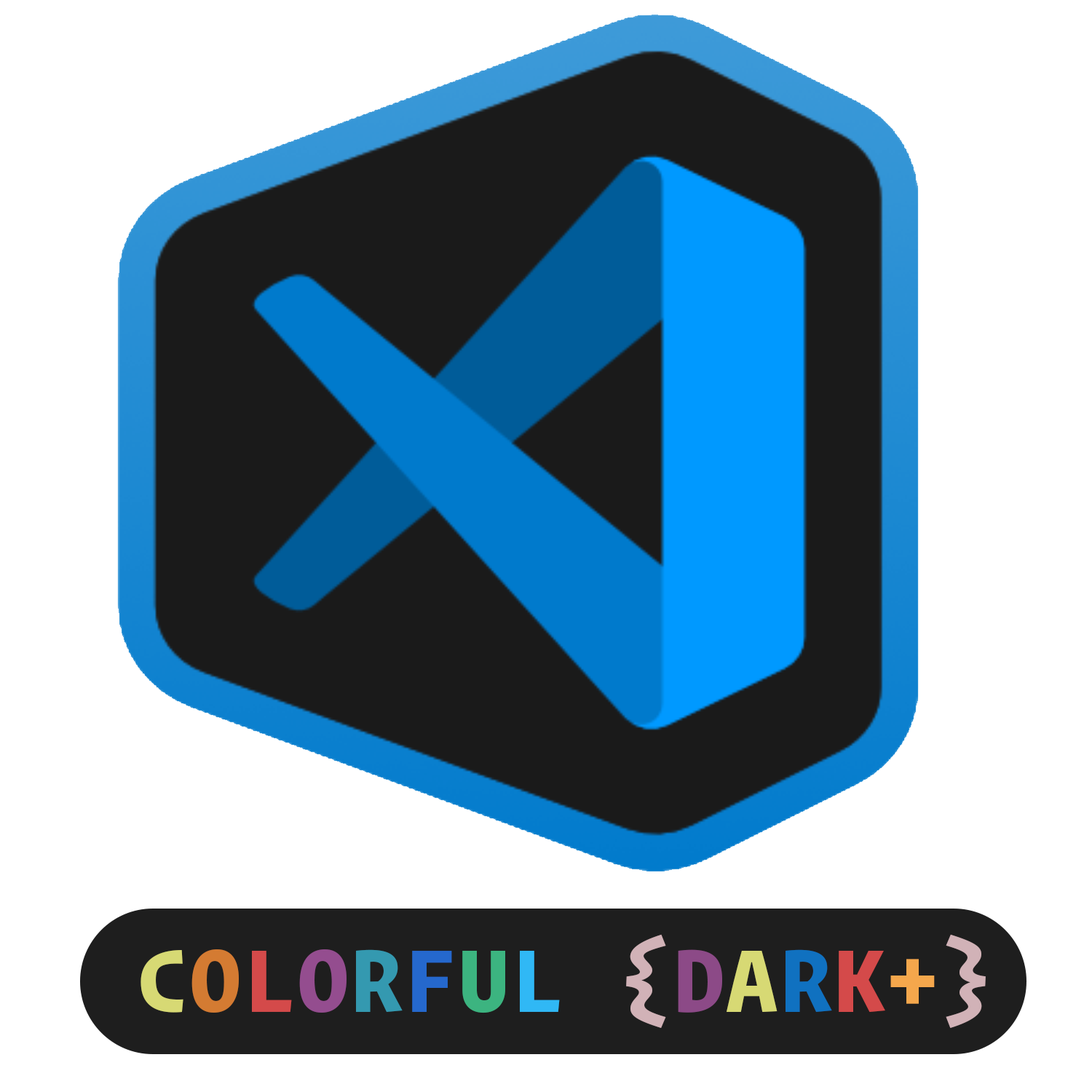
<style>
.page{position:relative;width:1092px;height:1092px;background:#ffffff}
.page>*{position:absolute;margin:0}
.t1{font:97.6px "OperatorMono-Bold";color:#d7d973;text-transform:uppercase}
.t2{font:97.6px "OperatorMono-Bold";color:#d47b32;text-transform:uppercase}
.t3{font:97.6px "OperatorMono-Bold";color:#d44a4a;text-transform:uppercase}
.t4{font:97.6px "OperatorMono-Bold";color:#944d8f;text-transform:uppercase}
.t5{font:97.6px "OperatorMono-Bold";color:#3499b0;text-transform:uppercase}
.t6{font:97.6px "OperatorMono-Bold";color:#2568cd;text-transform:uppercase}
.t7{font:97.6px "OperatorMono-Bold";color:#3cb480;text-transform:uppercase}
.t8{font:97.6px "OperatorMono-Bold";color:#30b8f5;text-transform:uppercase}
.t9{font:97.6px "OperatorMono-Bold";color:#d1b2b7;text-transform:uppercase}
.t10{font:97.6px "OperatorMono-Bold";color:#8c4a87;text-transform:uppercase}
.t11{font:97.6px "OperatorMono-Bold";color:#d7d974;text-transform:uppercase}
.t12{font:97.6px "OperatorMono-Bold";color:#1071c0;text-transform:uppercase}
.t13{font:97.6px "OperatorMono-Bold";color:#f5a74c;text-transform:uppercase}
</style>
<div class="page">
<p class="t1" style="left:141px;top:934px;width:845px;height:94px">C<span class="t2">o</span><span class="t3">l</span><span class="t4">o</span><span class="t5">r</span><span class="t6">f</span><span class="t7">u</span><span class="t8">l </span><span class="t9">{</span><span class="t10">d</span><span class="t11">a</span><span class="t12">r</span><span class="t3">k</span><span class="t13">+</span><span class="t9">}</span></p>
</div>
